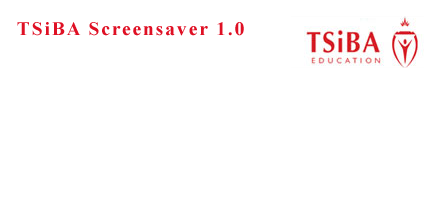
<style>
.page{position:relative;width:432px;height:208px;background:#ffffff}
.page>*{position:absolute;margin:0}
.t1{font:19.4px "TimesNewRomanPS-BoldMT";letter-spacing:0.1em;color:#df1024}
</style>
<div class="page">
<p class="t1" style="left:17px;top:22px;width:227px;height:14px">TSiBA Screensaver 1.0</p>
</div>
